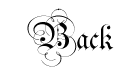
<style>
.page{position:relative;width:135px;height:79px;background:#ffffff}
.page>*{position:absolute;margin:0}
.t1{font:60px "Parchment-Regular";color:#020202}
</style>
<div class="page">
<p class="t1" style="left:27px;top:8px;width:87px;height:59px">Back</p>
</div>
